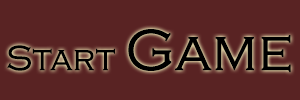
<style>
.page{position:relative;width:300px;height:100px;background:#592323}
.page>*{position:absolute;margin:0}
.t1{font:36px "CopperplateGothic-Light";letter-spacing:-0.01em;color:#000000;font-weight:bold}
.t2{font:60px "CopperplateGothic-Light";letter-spacing:-0.01em;color:#000000;font-weight:bold}
</style>
<div class="page">
<p class="t1" style="left:7px;top:29px;width:284px;height:44px">Start <span class="t2">Game</span></p>
</div>
